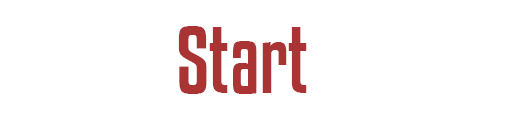
<style>
.page{position:relative;width:512px;height:128px;background:#ffffff}
.page>*{position:absolute;margin:0}
.t1{font:84px "KenyanCoffeeRg-Regular";color:#aa3333}
</style>
<div class="page">
<p class="t1" style="left:178px;top:26px;width:129px;height:68px">Start</p>
</div>
